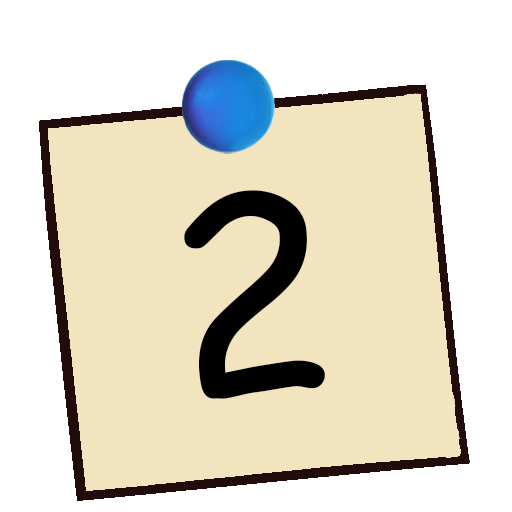
<style>
.page{position:relative;width:512px;height:512px;background:#f3e4c0}
.page>*{position:absolute;margin:0}
.t1{font:271.5px "ComicSansMS";color:#000000}
</style>
<div class="page">
<p class="t1" style="left:184px;top:190px;width:141px;height:209px;rotate:-7deg">2</p>
</div>
